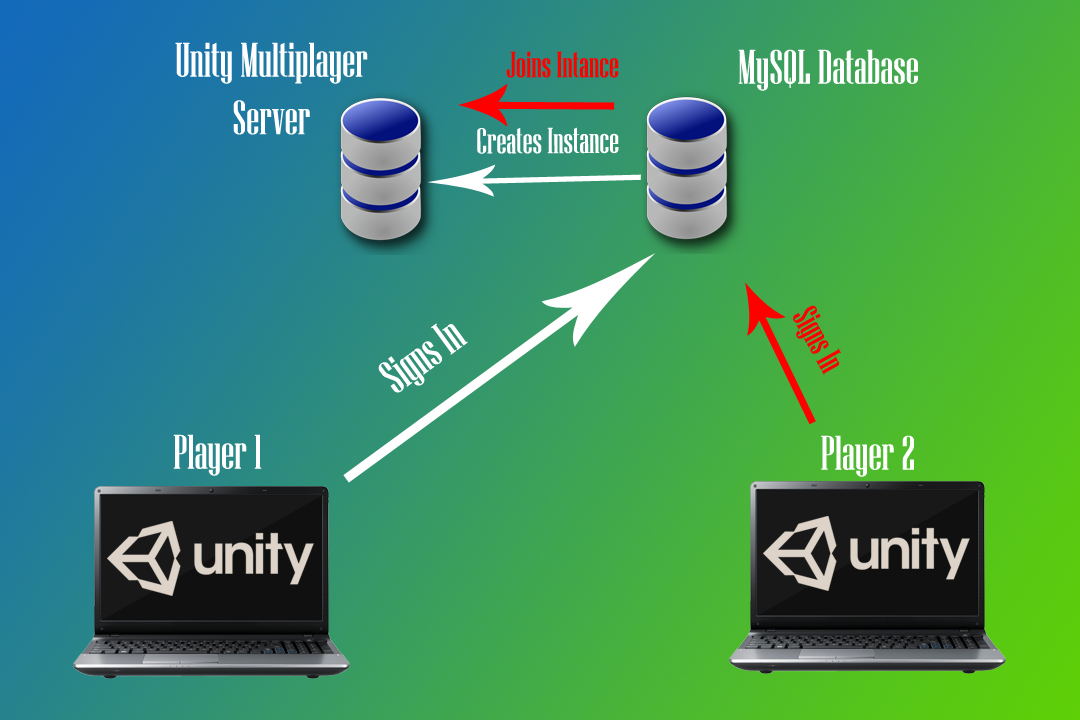
<style>
.page{position:relative;width:1080px;height:720px}
.page>*{position:absolute;margin:0}
.t1{font:48px "NiagaraSolid-Reg";color:#ffffff}
.t2{font:36px "NiagaraSolid-Reg";color:#ff0000}
.t3{font:36px "NiagaraSolid-Reg";color:#ffffff}
</style>
<div class="page">
<p class="t1" style="left:175px;top:42px;width:193px;height:93px;text-align:center">Unity Multiplayer Server</p>
<p class="t2" style="left:506px;top:51px;width:113px;height:27px">Joins Intance</p>
<p class="t1" style="left:738px;top:49px;width:180px;height:42px">MySQL Database</p>
<p class="t3" style="left:477px;top:127px;width:142px;height:27px">Creates Instance</p>
<p class="t2" style="left:793px;top:305px;width:48px;height:70px;rotate:61deg">Signs In</p>
<p class="t1" style="left:378px;top:323px;width:90px;height:70px;rotate:-36deg">Signs In</p>
<p class="t1" style="left:173px;top:434px;width:89px;height:42px">Player 1</p>
<p class="t1" style="left:821px;top:435px;width:93px;height:42px">Player 2</p>
</div>
